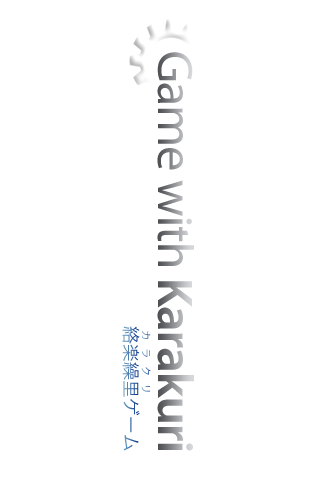
<style>
.page{position:relative;width:320px;height:480px;background:#ffffff}
.page>*{position:absolute;margin:0}
.t1{font:50.6px "MyriadPro-Regular";letter-spacing:-0.025em}
.t2{font:50.6px "MyriadPro-Semibold";letter-spacing:-0.025em}
.t3{font:18.2px "HiraKakuPro-W3"}
.t4{font:10.4px "HiraKakuProN-W3";letter-spacing:0.75em}
</style>
<div class="page">
<p class="t1" style="left:157px;top:52px;width:37px;height:399px;rotate:90deg">Game with <span class="t2">Karakuri</span></p>
<p class="t3" style="left:122px;top:326px;width:18px;height:125px;rotate:90deg">絡楽繰里ゲーム</p>
<p class="t4" style="left:141px;top:331px;width:10px;height:61px;rotate:90deg">カラクリ</p>
</div>
